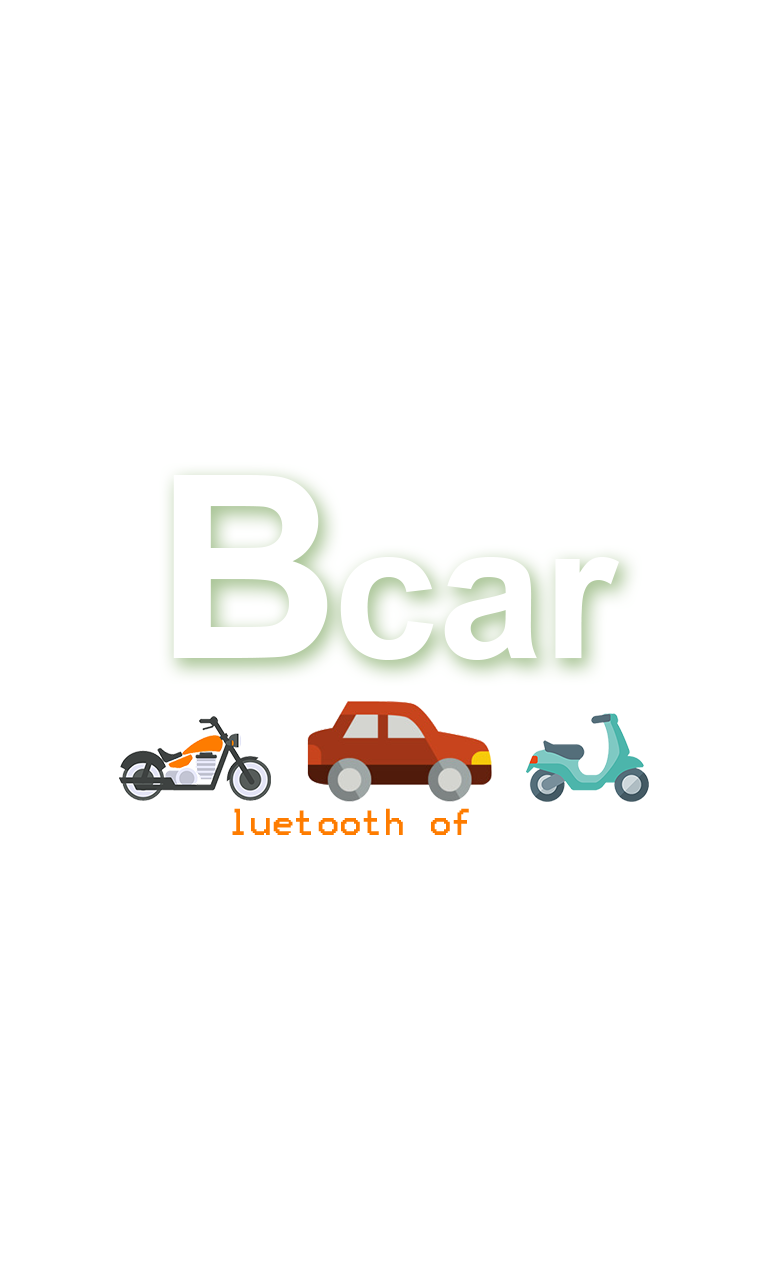
<style>
.page{position:relative;width:768px;height:1280px;background:#ffffff}
.page>*{position:absolute;margin:0}
.t1{font:255.5px "Arial-BoldMT";color:#ffffff}
.t2{font:189.1px "Arial-BoldMT";color:#ffffff}
.t3{font:30px "Terminal";color:#fe7c00}
.t4{font:30px "Terminal";color:#ffffff}
</style>
<div class="page">
<p class="t1" style="left:173px;top:475px;width:155px;height:183px">B</p>
<p class="t2" style="left:340px;top:557px;width:279px;height:103px">car</p>
<p class="t3" style="left:206px;top:808px;width:357px;height:27px"><span class="t4">B</span>luetooth of<span class="t4"> Car</span></p>
</div>
